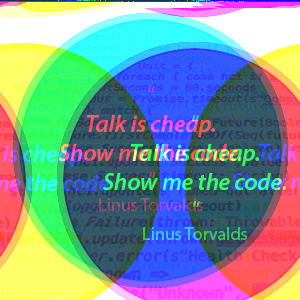
<style>
.page{position:relative;width:300px;height:300px}
.page>*{position:absolute;margin:0}
.t1{font:24px "MyriadPro-SemiboldIt"}
.t2{font:24px "MyriadPro-Regular"}
.t3{font:18px "MyriadPro-Regular"}
</style>
<div class="page">
<p class="t1" style="left:59px;top:84px;width:183px;height:125px;text-align:center"><span class="t2">“<br></span>Talk is cheap.<br>Show me the code.<br><span class="t2">”<br></span><span class="t3">Linus Torvalds</span></p>
</div>
